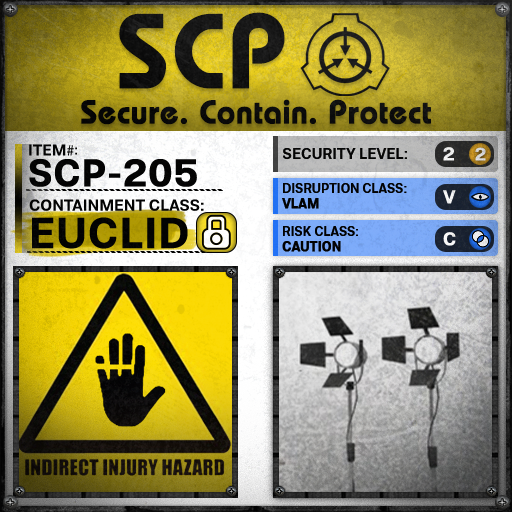
<style>
.page{position:relative;width:512px;height:512px}
.page>*{position:absolute;margin:0}
.t1{font:105.8px "BauhausLT-Demi";color:#000000;font-weight:bold}
.t2{font:33px "BauhausLT-Demi";color:#000000;font-weight:bold}
.t3{font:15.7px "Molde-Semibold";color:#000000}
.t4{font:15.7px "MyriadPro-Regular";color:#000000}
.t5{font:13.7px "Molde-Semibold";color:#000000}
.t6{font:15px "Molde-Semibold";color:#000000}
.t7{font:18.6px "Molde-Semibold";color:#ffffff;font-weight:bold}
.t8{font:17.8px "Molde-Semibold";color:#d7d8d7;font-weight:bold}
.t9{font:38.2px "Molde-Semibold";color:#000000;font-weight:bold}
.t10{font:12.8px "Molde-Semibold";color:#000000}
.t11{font:12.8px "Molde-Semibold";color:#000000;font-weight:bold}
.t12{font:15.9px "Molde-Semibold";color:#000000}
.t13{font:42.8px "Molde-Semibold";color:#000000;font-weight:bold}
</style>
<div class="page">
<p class="t1" style="left:119px;top:12px;width:166px;height:77px">SCP</p>
<p class="t2" style="left:81px;top:99px;width:350px;height:26px">Secure. Contain. Protect</p>
<p class="t3" style="left:29px;top:144px;width:45px;height:12px">ITEM<span class="t4">#</span></p>
<p class="t5" style="left:75px;top:147px;width:2px;height:8px">:</p>
<p class="t6" style="left:283px;top:148px;width:124px;height:11px">SECURITY LEVEL:</p>
<p class="t7" style="left:443px;top:147px;width:11px;height:14px">2</p>
<p class="t8" style="left:475px;top:147px;width:11px;height:14px">2</p>
<p class="t9" style="left:29px;top:159px;width:168px;height:28px">SCP-205</p>
<p class="t10" style="left:282px;top:183px;width:125px;height:26px">DISRUPTION CLASS:<br><span class="t11">VLAM</span></p>
<p class="t7" style="left:443px;top:190px;width:13px;height:14px">V</p>
<p class="t12" style="left:29px;top:199px;width:175px;height:12px">CONTAINMENT CLASS:</p>
<p class="t13" style="left:32px;top:217px;width:156px;height:32px">EUCLID</p>
<p class="t10" style="left:282px;top:226px;width:76px;height:26px">RISK CLASS:<br><span class="t11">CAUTION</span></p>
<p class="t7" style="left:443px;top:232px;width:13px;height:14px">C</p>
</div>
